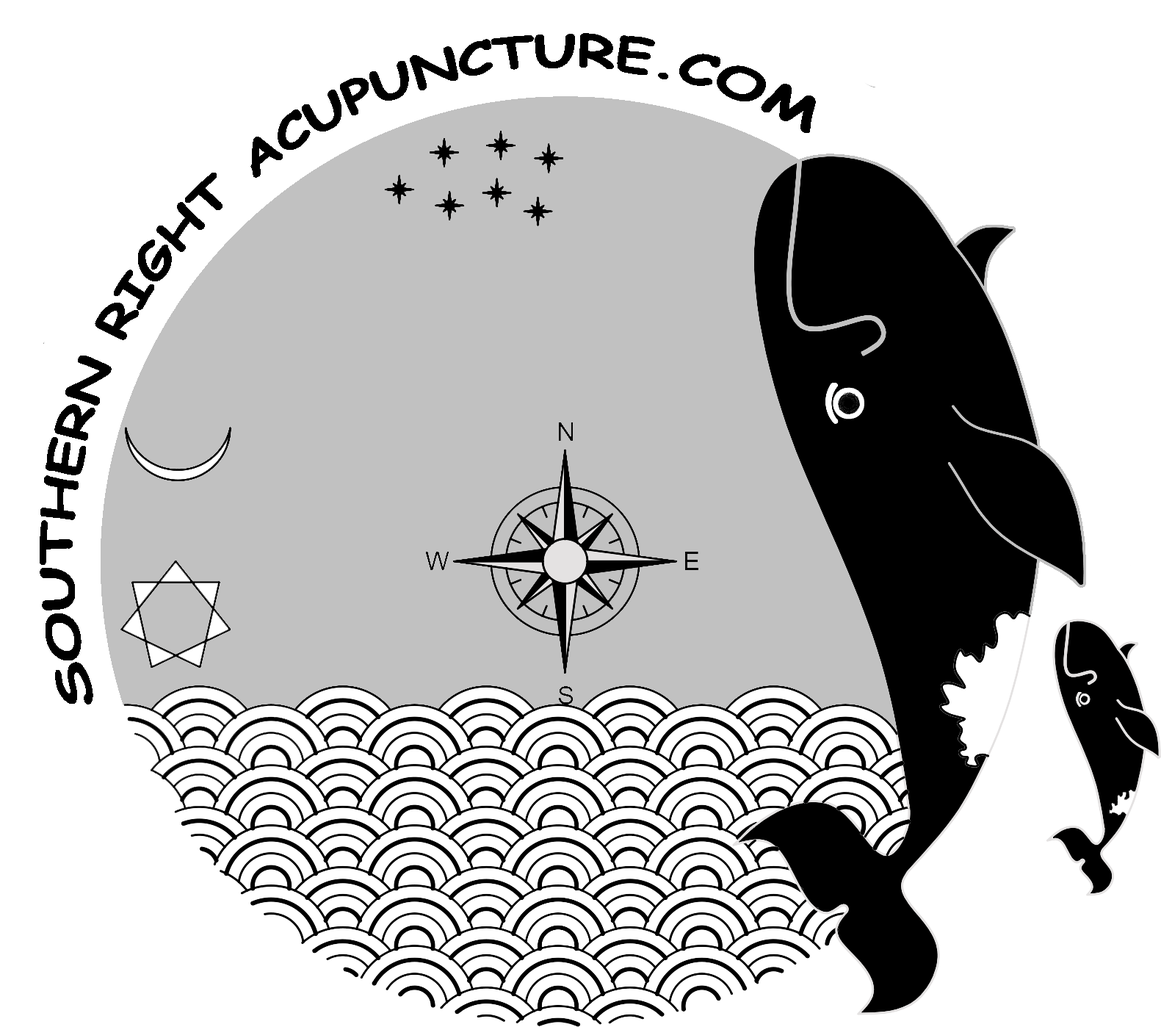
<style>
.page{position:relative;width:1161px;height:1027px;background:#ffffff}
.page>*{position:absolute;margin:0}
.t1{font:44.1px "ComicSansMS-Bold";color:#000000}
</style>
<div class="page">
<p class="t1" style="left:40px;top:33px;width:776px;height:671px;rotate:-39deg">SOUTHERN RIGHT ACUPUNCTURE.COM</p>
</div>
